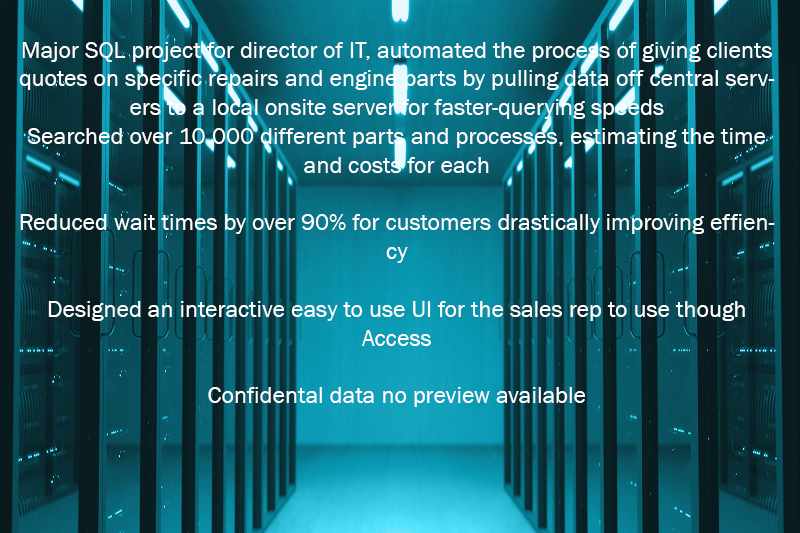
<style>
.page{position:relative;width:800px;height:533px}
.page>*{position:absolute;margin:0}
.t1{font:24px "FranklinGothic-Book";color:#ffffff}
</style>
<div class="page">
<p class="t1" style="left:19px;top:42px;width:756px;height:365px;text-align:center">Major SQL project for director of IT, automated the process of giving clients quotes on specific repairs and engine parts by pulling data off central servers to a local onsite server for faster-querying speeds<br>Searched over 10,000 different parts and processes, estimating the time and costs for each <br><br>Reduced wait times by over 90% for customers drastically improving effiency<br><br>Designed an interactive easy to use UI for the sales rep to use though Access<br><br>Confidental data no preview available</p>
</div>
